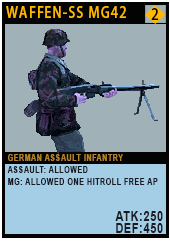
<style>
.page{position:relative;width:170px;height:241px;background:#a0b2b8}
.page>*{position:absolute;margin:0}
.t1{font:15.1px "AdobeHeitiStd-Regular";letter-spacing:0.08em;color:#ffb800;text-transform:uppercase;scale:0.86 1}
.t2{font:15.4px "AdobeHeitiStd-Regular";letter-spacing:0.08em;color:#000000;text-transform:uppercase;scale:0.88 1}
.t3{font:9.3px/12px "Arial-BoldMT";letter-spacing:0.08em;color:#191a22;text-transform:uppercase;scale:0.76 1}
.t4{font:9.3px/20.2px "Arial-BoldMT";letter-spacing:0.08em;color:#b4832c;text-transform:uppercase;scale:0.76 1}
.t5{font:13.9px/12px "Arial-BoldMT";letter-spacing:0.08em;color:#191a22;text-transform:uppercase;scale:0.76 1}
</style>
<div class="page">
<p class="t1" style="left:6px;top:6px;width:120px;height:12px">waffen-SS Mg42</p>
<p class="t2" style="left:151px;top:8px;width:8px;height:12px">2</p>
<p class="t3" style="left:7px;top:154px;width:156px;height:79px"><span class="t4">German assault infantry<br></span>assault: allowed <br>MG: allowed one hitroll free ap<br><br><br><span class="t5">atk:250<br>def:450</span></p>
</div>
